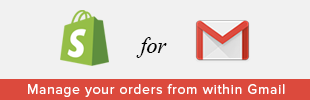
<style>
.page{position:relative;width:310px;height:100px;background:#f1f1f1}
.page>*{position:absolute;margin:0}
.t1{font:22px "TimesNewRomanPS-ItalicMT";color:#000000}
.t2{font:14px "ProximaNova-Regular";letter-spacing:0.05em;color:#ffffff}
</style>
<div class="page">
<p class="t1" style="left:136px;top:37px;width:31px;height:21px">for</p>
<p class="t2" style="left:28px;top:84px;width:257px;height:13px">Manage your orders from within Gmail</p>
</div>
